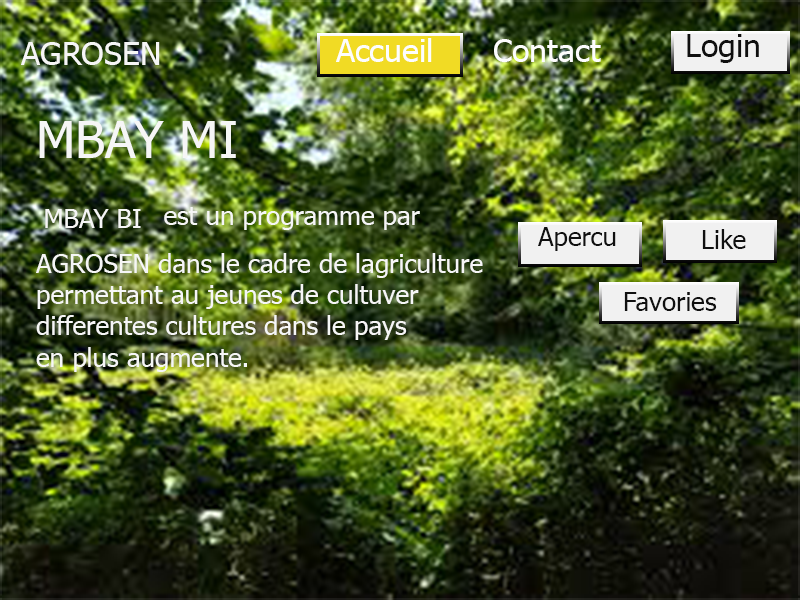
<style>
.page{position:relative;width:800px;height:600px}
.page>*{position:absolute;margin:0}
.t1{font:32px "Tahoma";color:#fdfdfd}
.t2{font:32px "Tahoma";color:#0f0f0f}
.t3{font:32px "Tahoma";color:#f6f6f6}
.t4{font:51px "Tahoma";color:#f6f6f6}
.t5{font:26px "Tahoma";color:#f6f6f6}
.t6{font:26px "Tahoma";color:#101010}
</style>
<div class="page">
<p class="t1" style="left:336px;top:38px;width:96px;height:24px">Accueil</p>
<p class="t1" style="left:494px;top:39px;width:107px;height:23px">Contact</p>
<p class="t2" style="left:687px;top:34px;width:72px;height:29px">Login</p>
<p class="t3" style="left:21px;top:42px;width:139px;height:23px">AGROSEN</p>
<p class="t4" style="left:39px;top:121px;width:197px;height:37px">MBAY MI</p>
<p class="t5" style="left:45px;top:209px;width:96px;height:19px">MBAY BI</p>
<p class="t5" style="left:164px;top:207px;width:256px;height:23px">est un programme par</p>
<p class="t6" style="left:538px;top:227px;width:78px;height:24px">Apercu</p>
<p class="t6" style="left:702px;top:229px;width:44px;height:20px">Like</p>
<p class="t5" style="left:36px;top:253px;width:447px;height:119px">AGROSEN dans le cadre de lagriculture<br>permettant au jeunes de cultuver <br>differentes cultures dans le pays<br>en plus augmente.</p>
<p class="t6" style="left:624px;top:292px;width:93px;height:19px">Favories</p>
</div>
